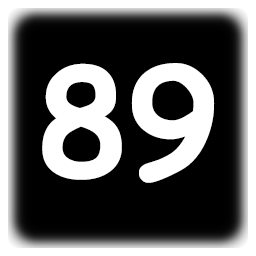
<style>
.page{position:relative;width:256px;height:256px;background:#000000}
.page>*{position:absolute;margin:0}
.t1{font:150px "ComicSansMS-Bold";color:#ffffff}
</style>
<div class="page">
<p class="t1" style="left:42px;top:63px;width:173px;height:120px">89</p>
</div>
